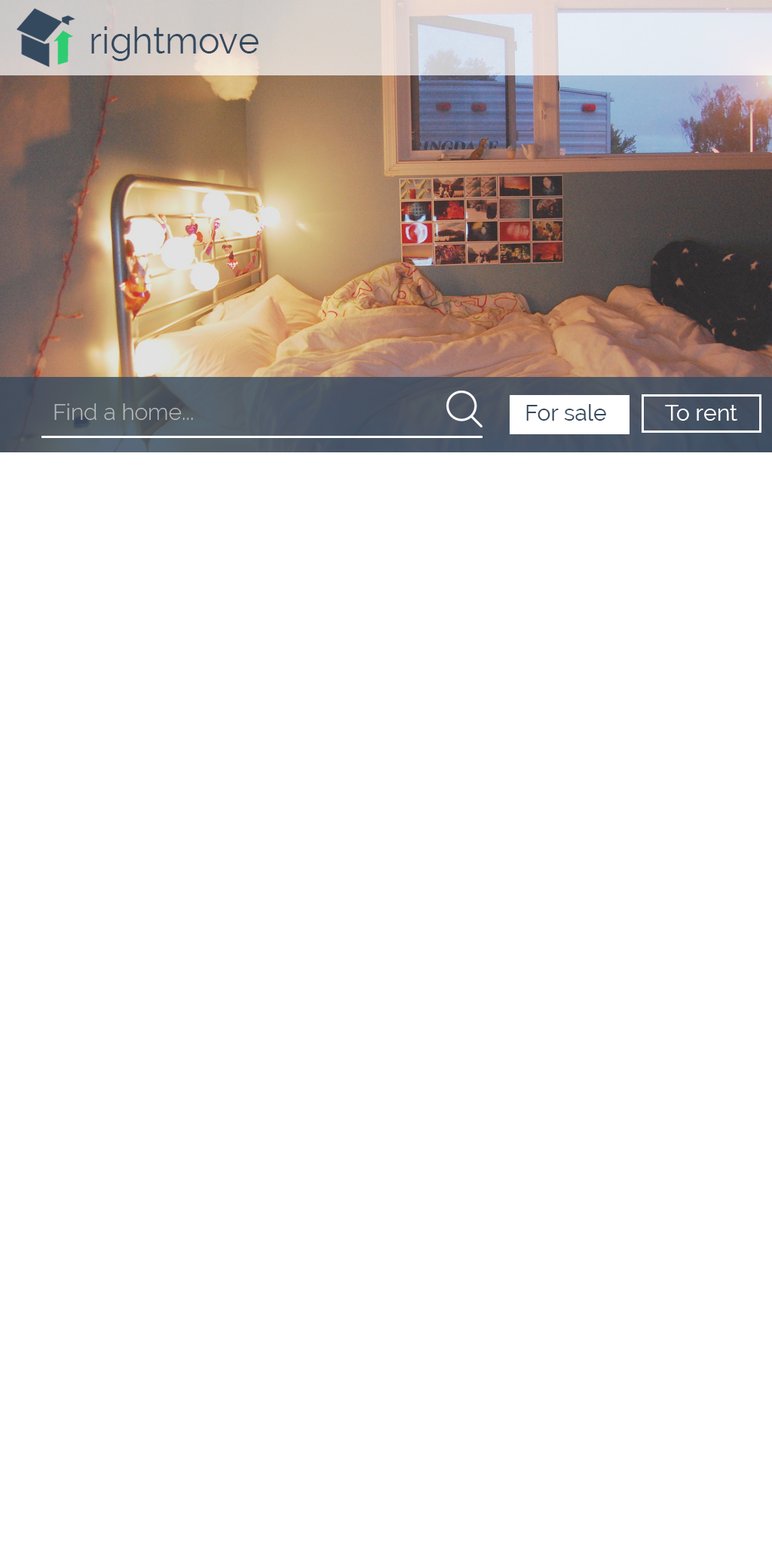
<style>
.page{position:relative;width:772px;height:1544px;background:#ffffff}
.page>*{position:absolute;margin:0}
.t1{font:36.2px "Raleway";color:#34495e}
.t2{font:22.6px "Raleway-Light";color:#b6b9bb}
.t3{font:22.6px "Raleway";color:#34495e}
.t4{font:22.6px "Raleway";color:#ffffff}
</style>
<div class="page">
<p class="t1" style="left:91px;top:26px;width:168px;height:35px">rightmove</p>
<p class="t2" style="left:54px;top:403px;width:139px;height:17px">Find a home...</p>
<p class="t3" style="left:526px;top:404px;width:80px;height:17px">For sale</p>
<p class="t4" style="left:665px;top:405px;width:72px;height:16px">To rent</p>
</div>
